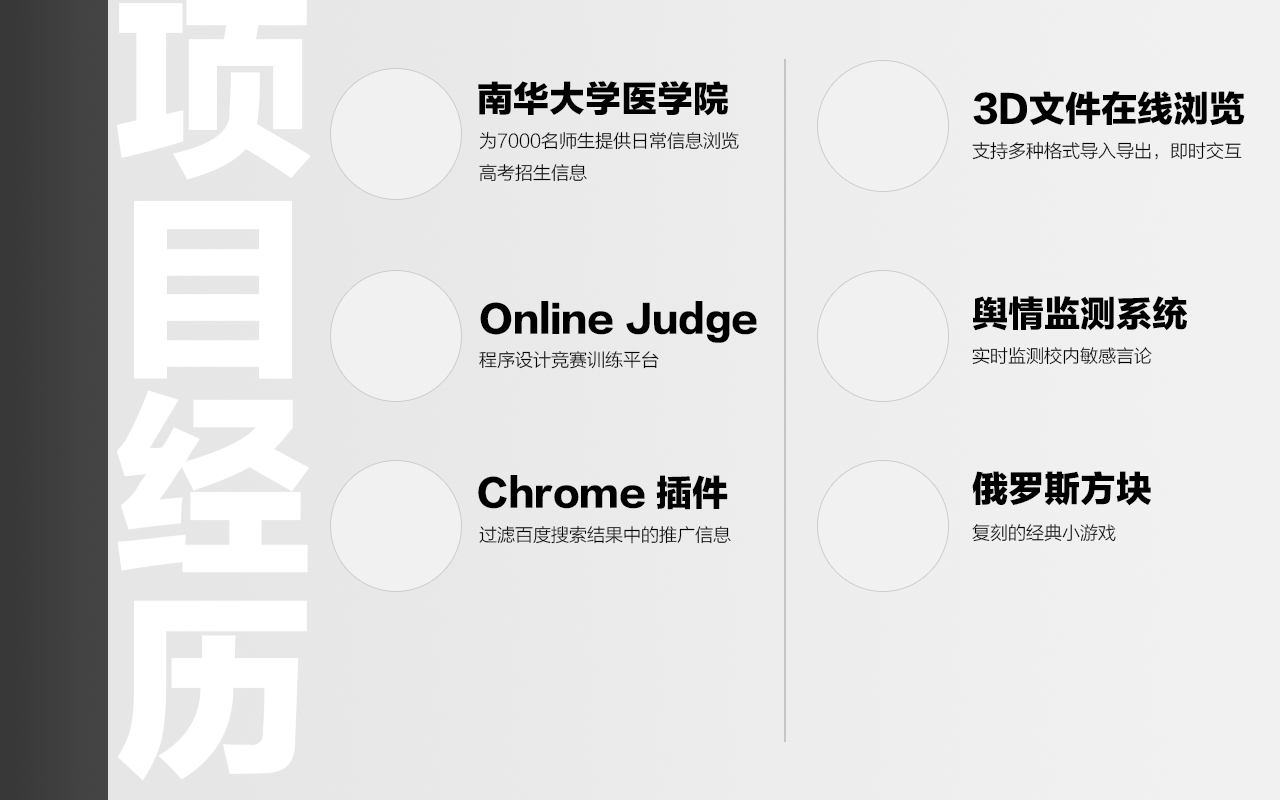
<style>
.page{position:relative;width:1280px;height:800px}
.page>*{position:absolute;margin:0}
.t1{font:36px "FZLTTHK--GBK1-0";color:#000000}
.t2{font:18px "FZLTXHK--GBK1-0";color:#000000}
</style>
<div class="page">
<p class="t1" style="left:478px;top:81px;width:250px;height:35px">南华大学医学院</p>
<p class="t1" style="left:973px;top:91px;width:272px;height:35px">3D文件在线浏览</p>
<p class="t2" style="left:479px;top:131px;width:260px;height:51px">为7000名师生提供日常信息浏览<br>高考招生信息</p>
<p class="t2" style="left:972px;top:141px;width:270px;height:19px">支持多种格式导入导出，即时交互</p>
<p class="t1" style="left:480px;top:301px;width:277px;height:42px">Online Judge</p>
<p class="t1" style="left:973px;top:296px;width:214px;height:35px">舆情监测系统</p>
<p class="t2" style="left:479px;top:351px;width:180px;height:18px">程序设计竞赛训练平台</p>
<p class="t2" style="left:972px;top:347px;width:180px;height:18px">实时监测校内敏感言论</p>
<p class="t1" style="left:972px;top:471px;width:179px;height:35px">俄罗斯方块</p>
<p class="t1" style="left:478px;top:475px;width:250px;height:35px">Chrome 插件</p>
<p class="t2" style="left:479px;top:525px;width:252px;height:19px">过滤百度搜索结果中的推广信息</p>
<p class="t2" style="left:972px;top:524px;width:144px;height:18px">复刻的经典小游戏</p>
</div>
